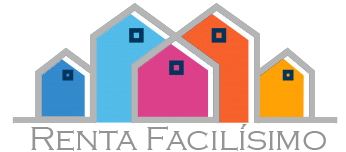
<style>
.page{position:relative;width:346px;height:152px;background:#ffffff}
.page>*{position:absolute;margin:0}
.t1{font:33.8px "CopperplateGothic-Light";color:#949494}
</style>
<div class="page">
<p class="t1" style="left:31px;top:124px;width:295px;height:27px">Renta Facilísimo</p>
</div>
